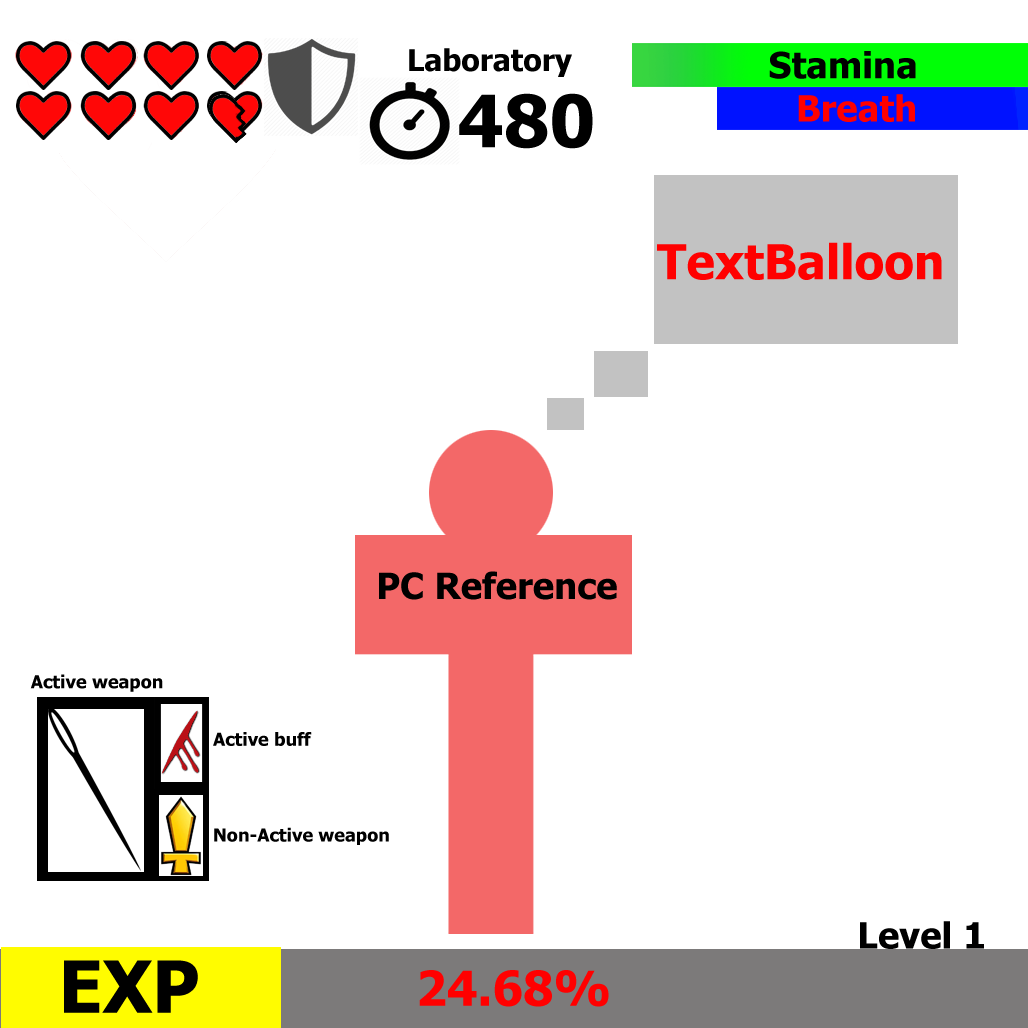
<style>
.page{position:relative;width:1028px;height:1028px;background:#ffffff}
.page>*{position:absolute;margin:0}
.t1{font:30px "Tahoma-Bold";color:#000000}
.t2{font:36px "Tahoma-Bold";color:#000000}
.t3{font:72px "Tahoma-Bold";color:#000000}
.t4{font:36px "Tahoma-Bold";color:#ff0000}
.t5{font:48px "Tahoma-Bold";color:#ff0000}
.t6{font:18px "Tahoma-Bold";color:#000000}
</style>
<div class="page">
<p class="t1" style="left:409px;top:48px;width:163px;height:29px">Laboratory</p>
<p class="t2" style="left:769px;top:51px;width:147px;height:28px">Stamina</p>
<p class="t3" style="left:459px;top:93px;width:134px;height:56px">480</p>
<p class="t4" style="left:798px;top:94px;width:117px;height:28px">Breath</p>
<p class="t5" style="left:657px;top:242px;width:285px;height:38px">TextBalloon</p>
<p class="t2" style="left:379px;top:571px;width:238px;height:29px">PC Reference</p>
<p class="t6" style="left:30px;top:674px;width:133px;height:18px">Active weapon</p>
<p class="t6" style="left:213px;top:732px;width:99px;height:14px">Active buff</p>
<p class="t6" style="left:214px;top:827px;width:175px;height:18px">Non-Active weapon</p>
<p class="t2" style="left:860px;top:921px;width:124px;height:28px">Level 1</p>
<p class="t3" style="left:64px;top:960px;width:134px;height:53px">EXP</p>
<p class="t5" style="left:419px;top:970px;width:190px;height:37px">24.68%</p>
</div>
